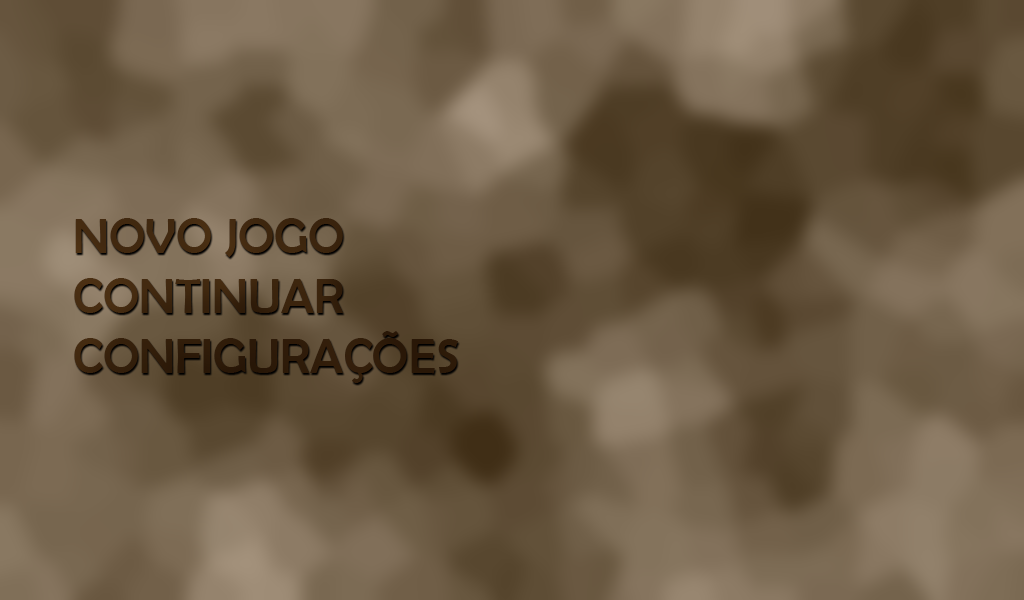
<style>
.page{position:relative;width:1024px;height:600px}
.page>*{position:absolute;margin:0}
.t1{font:50px "BerlinSansFB-Reg";color:#412f17}
</style>
<div class="page">
<p class="t1" style="left:74px;top:218px;width:384px;height:165px">NOVO JOGO<br>CONTINUAR<br>CONFIGURAÇÕES</p>
</div>
